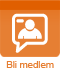
<style>
.page{position:relative;width:60px;height:68px;background:#e67f33}
.page>*{position:absolute;margin:0}
.t1{font:9.6px "ArialMT";color:#e67e31}
</style>
<div class="page">
<p class="t1" style="left:6px;top:61px;width:48px;height:7px">Bli medlem</p>
</div>
